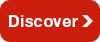
<style>
.page{position:relative;width:100px;height:42px;background:#cb1e0c}
.page>*{position:absolute;margin:0}
.t1{font:16px "HelveticaNeueLTPro-Bd";letter-spacing:0.026em;color:#ffffff}
</style>
<div class="page">
<p class="t1" style="left:9px;top:15px;width:70px;height:12px">Discover</p>
</div>
